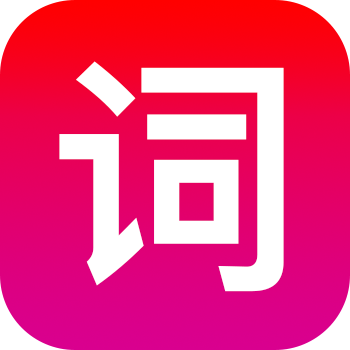
<style>
.page{position:relative;width:350px;height:350px;background:#ffffff}
.page>*{position:absolute;margin:0}
.t1{font:250.8px "PingFangSC-Semibold";color:#ffffff}
</style>
<div class="page">
<p class="t1" style="left:59px;top:61px;width:225px;height:231px">词</p>
</div>
